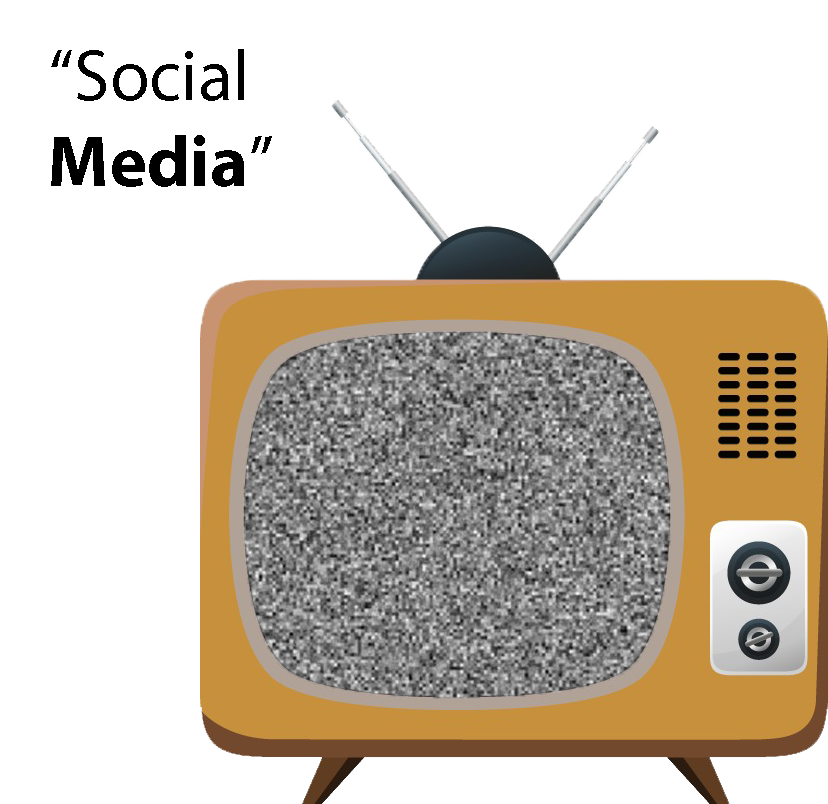
<style>
.page{position:relative;width:828px;height:804px;background:#ffffff}
.page>*{position:absolute;margin:0}
.t1{font:72px "MyriadPro-Regular";color:#000000}
.t2{font:72px "MyriadPro-Bold";color:#000000}
</style>
<div class="page">
<p class="t1" style="left:51px;top:49px;width:221px;height:138px">“Social<br><span class="t2">Media</span>”</p>
</div>
